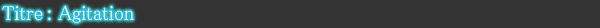
<style>
.page{position:relative;width:600px;height:28px;background:#333333}
.page>*{position:absolute;margin:0}
.t1{font:20px "MS-PMincho";color:#ffffff}
</style>
<div class="page">
<p class="t1" style="left:2px;top:6px;width:132px;height:17px">Titre : Agitation</p>
</div>
